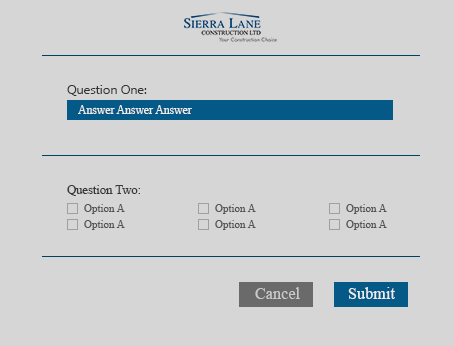
<style>
.page{position:relative;width:454px;height:346px;background:#d7d6d6}
.page>*{position:absolute;margin:0}
.t1{font:12.3px "MyanmarText";color:#333232}
.t2{font:12px "TimesNewRomanPSMT";color:#ececec}
.t3{font:12.3px "TimesNewRomanPSMT";color:#373737}
.t4{font:11px "TimesNewRomanPSMT";color:#535353}
.t5{font:16.7px "TimesNewRomanPSMT";color:#c9c9c9}
.t6{font:16.7px "TimesNewRomanPSMT";color:#ececec}
</style>
<div class="page">
<p class="t1" style="left:67px;top:85px;width:80px;height:11px">Question One:</p>
<p class="t2" style="left:78px;top:105px;width:114px;height:9px">Answer Answer Answer</p>
<p class="t3" style="left:67px;top:185px;width:73px;height:11px">Question Two:</p>
<p class="t4" style="left:84px;top:204px;width:41px;height:10px">Option A</p>
<p class="t4" style="left:215px;top:204px;width:41px;height:10px">Option A</p>
<p class="t4" style="left:346px;top:204px;width:41px;height:10px">Option A</p>
<p class="t4" style="left:84px;top:220px;width:41px;height:10px">Option A</p>
<p class="t4" style="left:215px;top:220px;width:41px;height:10px">Option A</p>
<p class="t4" style="left:346px;top:220px;width:41px;height:10px">Option A</p>
<p class="t5" style="left:255px;top:287px;width:45px;height:12px">Cancel</p>
<p class="t6" style="left:348px;top:287px;width:47px;height:12px">Submit</p>
</div>
